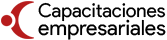
<style>
.page{position:relative;width:167px;height:40px;background:#ffffff}
.page>*{position:absolute;margin:0}
.t1{font:19px "ProductSans-Regular";color:#000000}
.t2{font:21px/18px "ProductSans-Regular";color:#000000}
</style>
<div class="page">
<p class="t1" style="left:38px;top:2px;width:128px;height:38px">Capacitaciones<br><span class="t2">empresariales</span></p>
</div>
